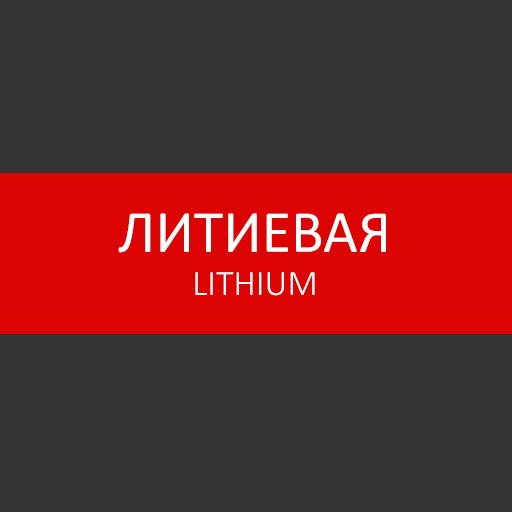
<style>
.page{position:relative;width:512px;height:512px;background:#333333}
.page>*{position:absolute;margin:0}
.t1{font:60px "Calibri";color:#ffffff}
.t2{font:36px "Calibri-Light";color:#ffffff}
</style>
<div class="page">
<p class="t1" style="left:118px;top:213px;width:268px;height:83px;text-align:center">ЛИТИЕВАЯ<br><span class="t2">LITHIUM</span></p>
</div>
